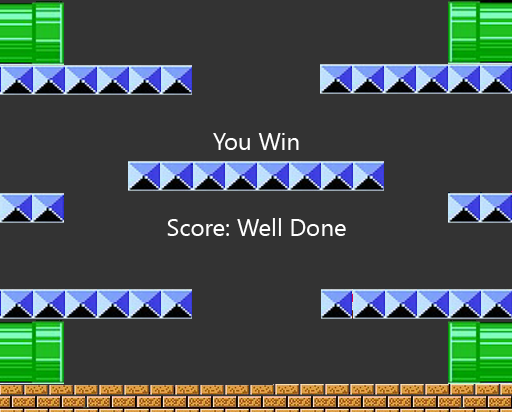
<style>
.page{position:relative;width:512px;height:412px;background:#333333}
.page>*{position:absolute;margin:0}
.t1{font:24px "SegoeUISymbol";color:#ffffff}
</style>
<div class="page">
<p class="t1" style="left:167px;top:133px;width:179px;height:103px;text-align:center">You Win<br><br><br>Score: Well Done</p>
</div>
